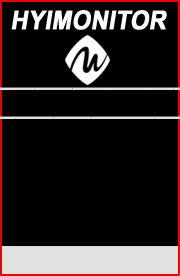
<style>
.page{position:relative;width:180px;height:276px;background:#000000}
.page>*{position:absolute;margin:0}
.t1{font:26px "Arial-BoldMT";color:#fbfbfb;font-weight:bold;font-style:italic;scale:0.9 1}
</style>
<div class="page">
<p class="t1" style="left:11px;top:10px;width:156px;height:20px">HYIMONITOR</p>
</div>
